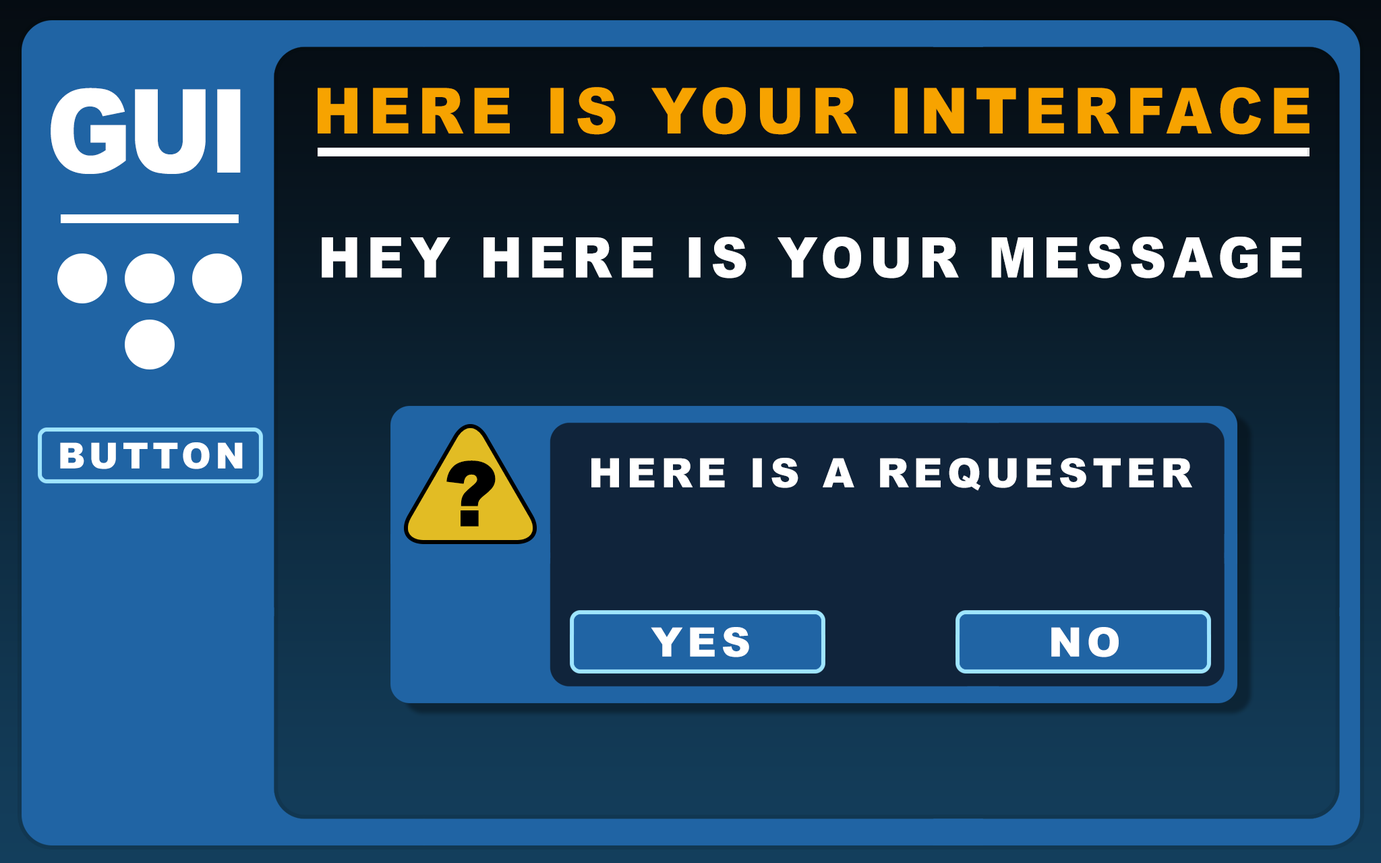
<style>
.page{position:relative;width:1381px;height:863px;background:#2064a4}
.page>*{position:absolute;margin:0}
.t1{font:116.1px "Arial-Black";letter-spacing:-0.04em;color:#ffffff;scale:0.88 1}
.t2{font:63.6px "Arial-Black";letter-spacing:0.12em;color:#f7a300;scale:0.92 1}
.t3{font:56.1px "Arial-Black";letter-spacing:0.12em;color:#ffffff;scale:0.92 1}
.t4{font:35.7px "Arial-Black";letter-spacing:0.12em;color:#ffffff}
.t5{font:90.1px "Arial-Black";letter-spacing:0.12em;color:#000000}
.t6{font:40.4px "Arial-Black";letter-spacing:0.12em;color:#ffffff}
</style>
<div class="page">
<p class="t1" style="left:51px;top:88px;width:190px;height:86px">GUI</p>
<p class="t2" style="left:318px;top:87px;width:992px;height:48px">HERE IS YOUR INTERFACE</p>
<p class="t3" style="left:322px;top:237px;width:980px;height:42px">HEY HERE IS YOUR MESSAGE</p>
<p class="t4" style="left:60px;top:442px;width:183px;height:27px">BUTTON</p>
<p class="t5" style="left:446px;top:461px;width:50px;height:66px">?</p>
<p class="t6" style="left:591px;top:458px;width:601px;height:33px">HERE IS A REQUESTER</p>
<p class="t6" style="left:651px;top:627px;width:98px;height:31px">YES</p>
<p class="t6" style="left:1051px;top:627px;width:68px;height:31px">NO</p>
</div>
